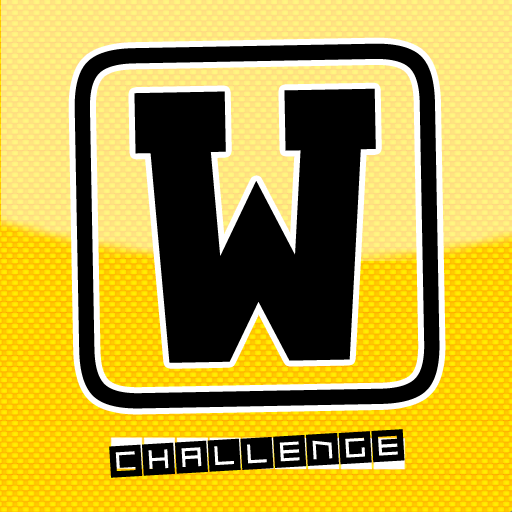
<style>
.page{position:relative;width:512px;height:512px;background:#000000}
.page>*{position:absolute;margin:0}
.t1{font:300px "babybloc";color:#000000}
.t2{font:48px "Qubix";color:#000000}
</style>
<div class="page">
<p class="t1" style="left:74px;top:43px;width:366px;height:366px;rotate:-1deg">W</p>
<p class="t2" style="left:109px;top:429px;width:296px;height:49px;rotate:-3deg">Challenge</p>
</div>
